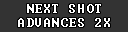
<style>
.page{position:relative;width:128px;height:32px;background:#333333}
.page>*{position:absolute;margin:0}
.t1{font:12px/14px "Terminal";letter-spacing:0.1em;color:#ffffff}
</style>
<div class="page">
<p class="t1" style="left:18px;top:4px;width:92px;height:23px;text-align:center">NEXT SHOT<br>ADVANCES 2X</p>
</div>
